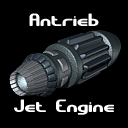
<style>
.page{position:relative;width:128px;height:128px;background:#000000}
.page>*{position:absolute;margin:0}
.t1{font:18px "GravitateBRK";color:#ffffff}
</style>
<div class="page">
<p class="t1" style="left:29px;top:13px;width:70px;height:13px">Antrieb</p>
<p class="t1" style="left:14px;top:99px;width:100px;height:16px">Jet Engine</p>
</div>
